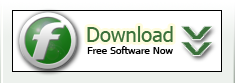
<style>
.page{position:relative;width:235px;height:83px;background:#ffffff}
.page>*{position:absolute;margin:0}
.t1{font:20px "Tahoma";color:#3c713b}
.t2{font:10.2px "Tahoma";color:#000000}
</style>
<div class="page">
<p class="t1" style="left:87px;top:26px;width:86px;height:16px">Download</p>
<p class="t2" style="left:87px;top:46px;width:86px;height:8px">Free Software Now</p>
</div>
